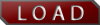
<style>
.page{position:relative;width:100px;height:25px}
.page>*{position:absolute;margin:0}
.t1{font:21px "MyriadPro-Regular";letter-spacing:0.22em;font-weight:bold}
</style>
<div class="page">
<p class="t1" style="left:17px;top:5px;width:67px;height:16px">LOAD</p>
</div>
